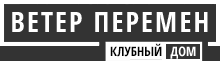
<style>
.page{position:relative;width:220px;height:61px;background:#333333}
.page>*{position:absolute;margin:0}
.t1{font:28px "OpenSans-CondensedBold";letter-spacing:0.075em;color:#ffffff}
</style>
<div class="page">
<p class="t1" style="left:12px;top:12px;width:196px;height:20px">ВЕТЕР ПЕРЕМЕН</p>
</div>
